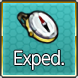
<style>
.page{position:relative;width:78px;height:78px}
.page>*{position:absolute;margin:0}
.t1{font:18px "UDShinGoPro-Regular";letter-spacing:-0.04em;color:#ffffff;scale:0.9 1}
</style>
<div class="page">
<p class="t1" style="left:14px;top:50px;width:50px;height:20px">Exped.</p>
</div>
